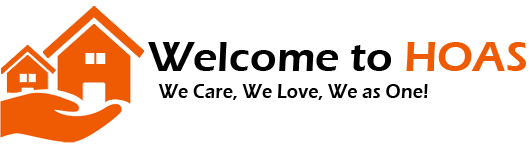
<style>
.page{position:relative;width:529px;height:149px;background:#ffffff}
.page>*{position:absolute;margin:0}
.t1{font:10.3px "ErasITC-Demi";color:#000000}
.t2{font:10.3px "ErasITC-Demi";color:#ef5b02}
.t3{font:21.2px "ErasITC-Demi";color:#000000;scale:0.87 1}
</style>
<div class="page">
<p class="t1" style="left:148px;top:42px;width:378px;height:29px;text-align:right">Welcome to <span class="t2">HOAS</span></p>
<p class="t3" style="left:158px;top:84px;width:270px;height:16px">We Care, We Love, We as One!</p>
</div>
